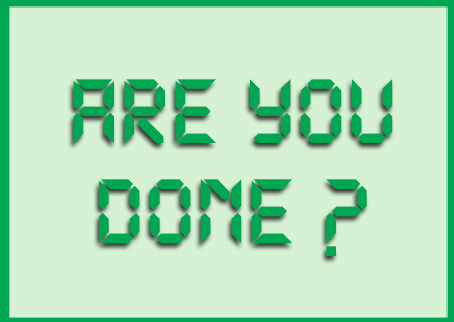
<style>
.page{position:relative;width:454px;height:322px;background:#d6f1d3}
.page>*{position:absolute;margin:0}
.t1{font:100px/100px "DS-Digital-Bold";color:#00a651}
</style>
<div class="page">
<p class="t1" style="left:73px;top:79px;width:320px;height:177px;text-align:center">Are you<br>done ?</p>
</div>
